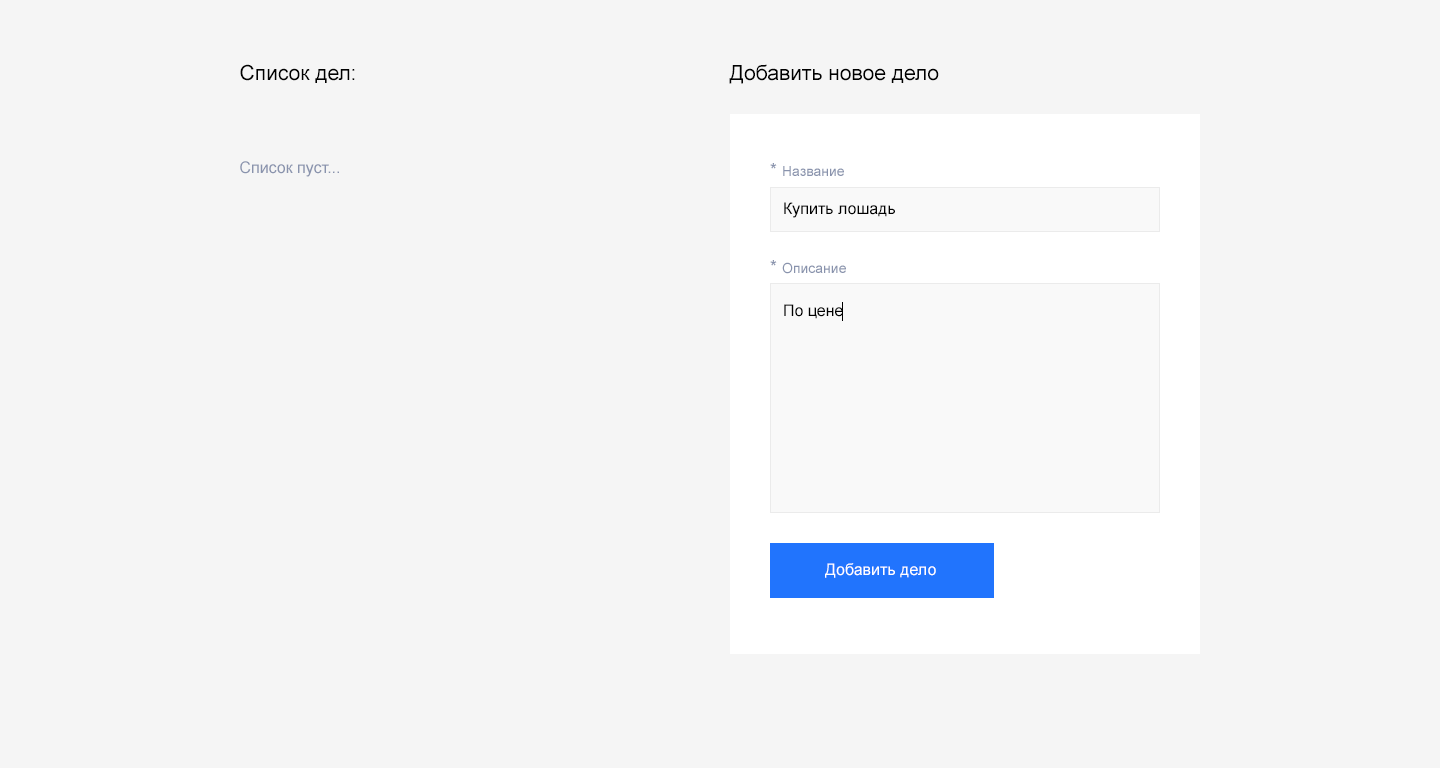
<style>
.page{position:relative;width:1440px;height:768px;background:#f5f5f5}
.page>*{position:absolute;margin:0}
.t1{font:21px "ArialMT";color:#000000}
.t2{font:16px "ArialMT";color:#8993ad}
.t3{font:14px "ArialMT";color:#8993ad}
.t4{font:18px "ArialMT";color:#8993ad}
.t5{font:16px "ArialMT";color:#000000}
.t6{font:16px "ArialMT";color:#ffffff}
</style>
<div class="page">
<p class="t1" style="left:240px;top:64px;width:115px;height:19px">Список дел:</p>
<p class="t1" style="left:729px;top:64px;width:210px;height:20px">Добавить новое дело</p>
<p class="t2" style="left:240px;top:161px;width:99px;height:16px">Список пуст...</p>
<p class="t3" style="left:770px;top:163px;width:74px;height:13px"><span class="t4">* </span>Название</p>
<p class="t5" style="left:784px;top:202px;width:111px;height:16px">Купить лошадь</p>
<p class="t3" style="left:770px;top:260px;width:76px;height:14px"><span class="t4">* </span>Описание</p>
<p class="t5" style="left:784px;top:304px;width:59px;height:15px">По цене</p>
<p class="t6" style="left:825px;top:563px;width:111px;height:15px">Добавить дело</p>
</div>
